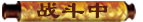
<style>
.page{position:relative;width:143px;height:22px}
.page>*{position:absolute;margin:0}
.t1{font:24px "LiSu";color:#561f14;font-weight:bold}
</style>
<div class="page">
<p class="t1" style="left:37px;top:2px;width:71px;height:17px">战斗中</p>
</div>
